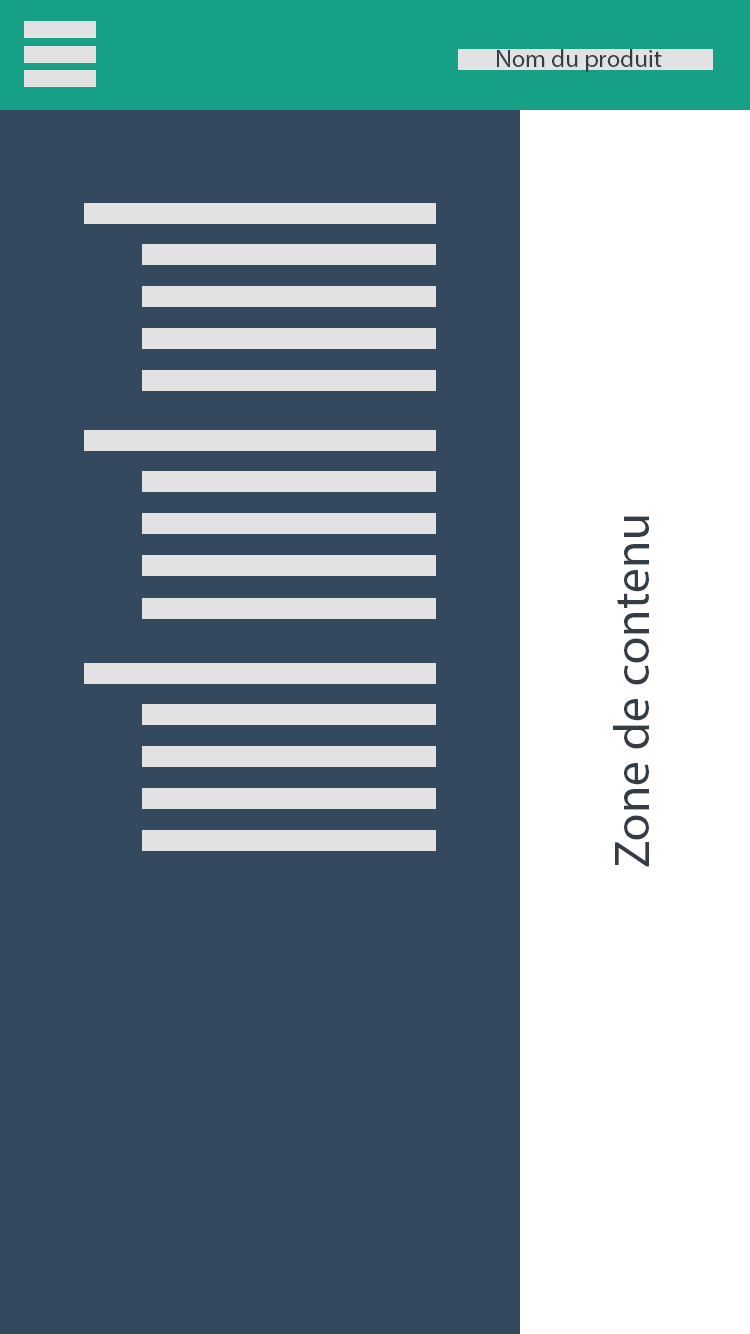
<style>
.page{position:relative;width:750px;height:1334px;background:#34495e}
.page>*{position:absolute;margin:0}
.t1{font:25px "MyriadPro-Regular";color:#343c45}
.t2{font:12px "MyriadPro-Regular";color:#343c45}
</style>
<div class="page">
<p class="t1" style="left:497px;top:49px;width:165px;height:23px">Nom du produit</p>
<p class="t2" style="left:613px;top:516px;width:36px;height:351px;rotate:-90deg">Zone de contenu</p>
</div>
